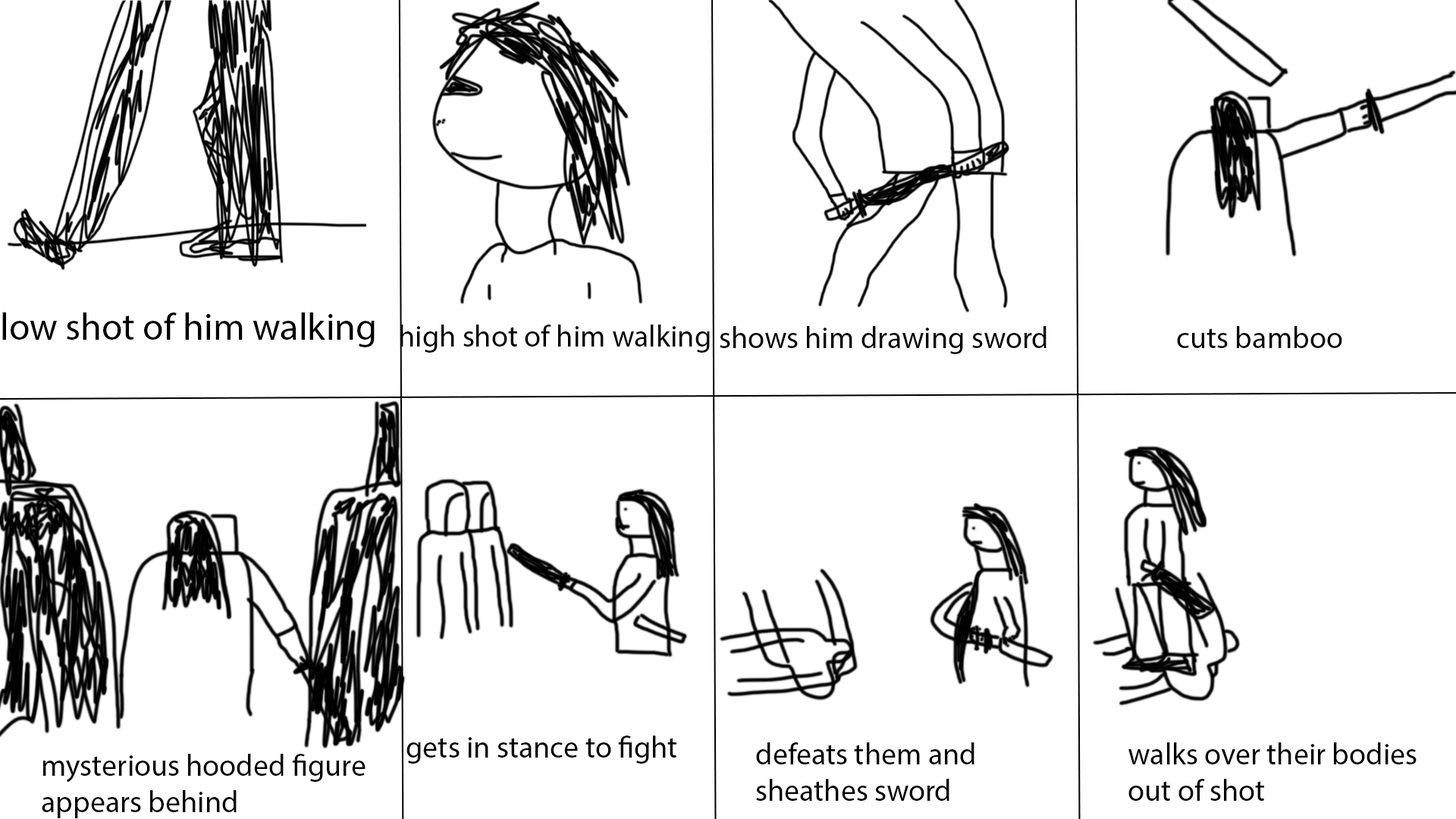
<style>
.page{position:relative;width:1456px;height:819px;background:#ffffff}
.page>*{position:absolute;margin:0}
.t1{font:37.9px "MyriadPro-Regular";color:#000000}
.t2{font:30.3px "MyriadPro-Regular";color:#000000}
</style>
<div class="page">
<p class="t1" style="left:2px;top:312px;width:373px;height:35px">low shot of him walking</p>
<p class="t2" style="left:400px;top:325px;width:310px;height:28px">high shot of him walking</p>
<p class="t2" style="left:720px;top:326px;width:326px;height:28px">shows him drawing sword</p>
<p class="t2" style="left:1177px;top:326px;width:165px;height:22px">cuts bamboo</p>
<p class="t2" style="left:406px;top:736px;width:270px;height:28px">gets in stance to fight</p>
<p class="t2" style="left:756px;top:742px;width:218px;height:59px">defeats them and sheathes sword</p>
<p class="t2" style="left:1128px;top:742px;width:289px;height:59px">walks over their bodies<br>out of shot</p>
<p class="t2" style="left:42px;top:754px;width:324px;height:64px">mysterious hooded figure appears behind</p>
</div>
